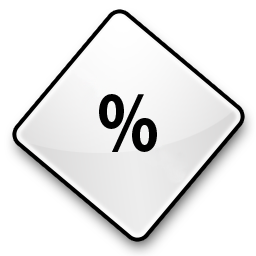
<style>
.page{position:relative;width:256px;height:256px;background:#ffffff}
.page>*{position:absolute;margin:0}
.t1{font:85.8px "MyriadPro-Bold";letter-spacing:0.005em;color:#010101;scale:0.82 1}
</style>
<div class="page">
<p class="t1" style="left:99px;top:94px;width:58px;height:58px">%</p>
</div>
